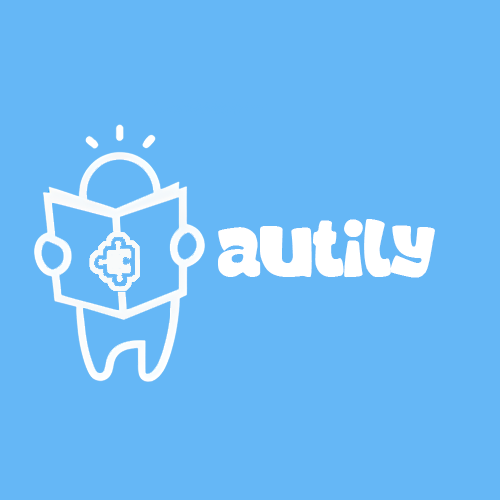
<style>
.page{position:relative;width:500px;height:500px;background:#65b7f6}
.page>*{position:absolute;margin:0}
.t1{font:72.2px "DaddyCartoon";color:#ffffff}
</style>
<div class="page">
<p class="t1" style="left:218px;top:219px;width:217px;height:59px">AUTILY</p>
<p class="t1" style="left:218px;top:219px;width:217px;height:59px">AUTILY</p>
</div>
